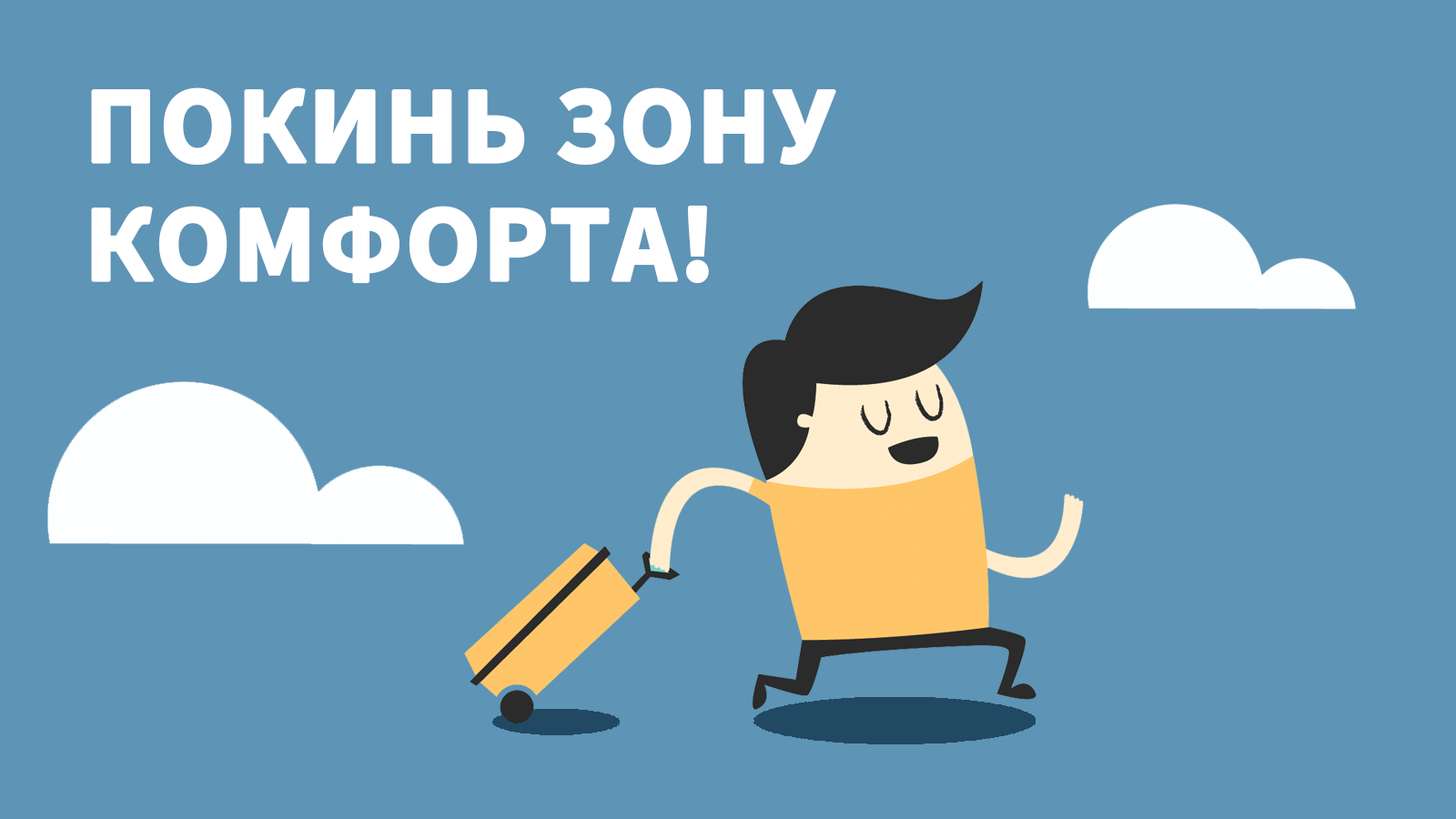
<style>
.page{position:relative;width:1456px;height:819px;background:#5e94b6}
.page>*{position:absolute;margin:0}
.t1{font:109.2px/109.2px "SourceSansPro-Bold";color:#ffffff;text-transform:uppercase;font-weight:bold}
</style>
<div class="page">
<p class="t1" style="left:91px;top:87px;width:745px;height:197px">Покинь зону <br>комфорта!</p>
</div>
